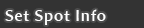
<style>
.page{position:relative;width:144px;height:28px;background:#333333}
.page>*{position:absolute;margin:0}
.t1{font:16px "AmiraParadiso";letter-spacing:0.05em;color:#ffffff}
</style>
<div class="page">
<p class="t1" style="left:5px;top:9px;width:101px;height:16px">Set Spot Info</p>
</div>
